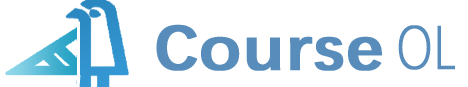
<style>
.page{position:relative;width:468px;height:87px;background:#ffffff}
.page>*{position:absolute;margin:0}
.t1{font:64px "DengXian-Bold";color:#588cbb;font-weight:bold;scale:1.1 1}
.t2{font:62px "DengXian-Light";color:#588cbb;font-weight:bold;scale:0.76 1}
</style>
<div class="page">
<p class="t1" style="left:156px;top:24px;width:226px;height:47px">Course</p>
<p class="t2" style="left:398px;top:25px;width:57px;height:45px">OL</p>
</div>
